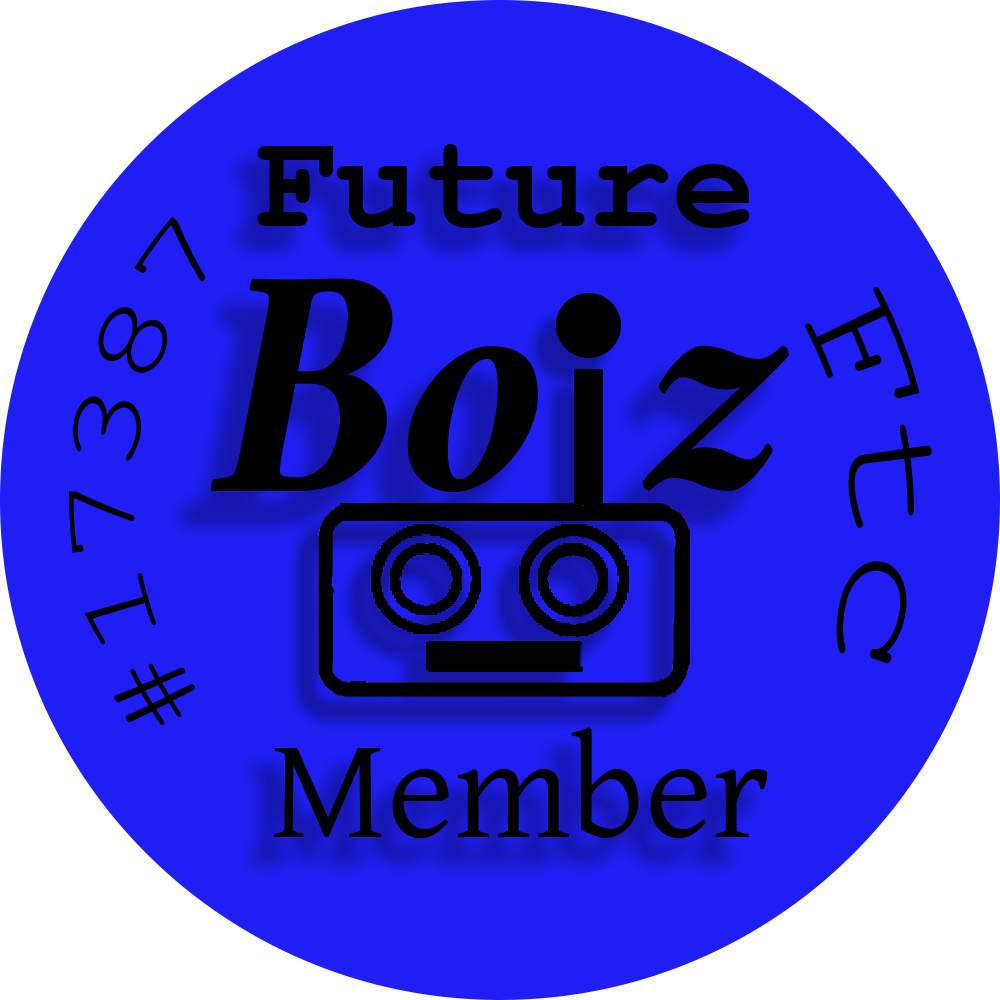
<style>
.page{position:relative;width:1000px;height:1000px;background:#1f1ff5}
.page>*{position:absolute;margin:0}
.t1{font:140.4px "CourierNewPS-BoldMT";color:#000000}
.t2{font:105.1px "CourierNewPSMT";color:#000000}
.t3{font:146.2px "CourierNewPSMT";color:#000000}
.t4{font:145.4px "DavidLibre-Regular";color:#000000}
</style>
<div class="page">
<p class="t1" style="left:257px;top:144px;width:493px;height:84px">Future</p>
<p class="t2" style="left:69px;top:216px;width:137px;height:510px;rotate:-87deg">#17387</p>
<p class="t3" style="left:805px;top:286px;width:127px;height:378px;rotate:85deg">Ftc</p>
<p class="t4" style="left:274px;top:727px;width:494px;height:111px">Member</p>
</div>
